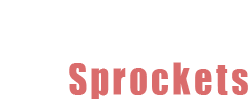
<style>
.page{position:relative;width:250px;height:100px;background:#ffffff}
.page>*{position:absolute;margin:0}
.t1{font:48px "JCHEadA";letter-spacing:0.06em;color:#da6c6c}
</style>
<div class="page">
<p class="t1" style="left:69px;top:62px;width:179px;height:37px">Sprockets</p>
</div>
